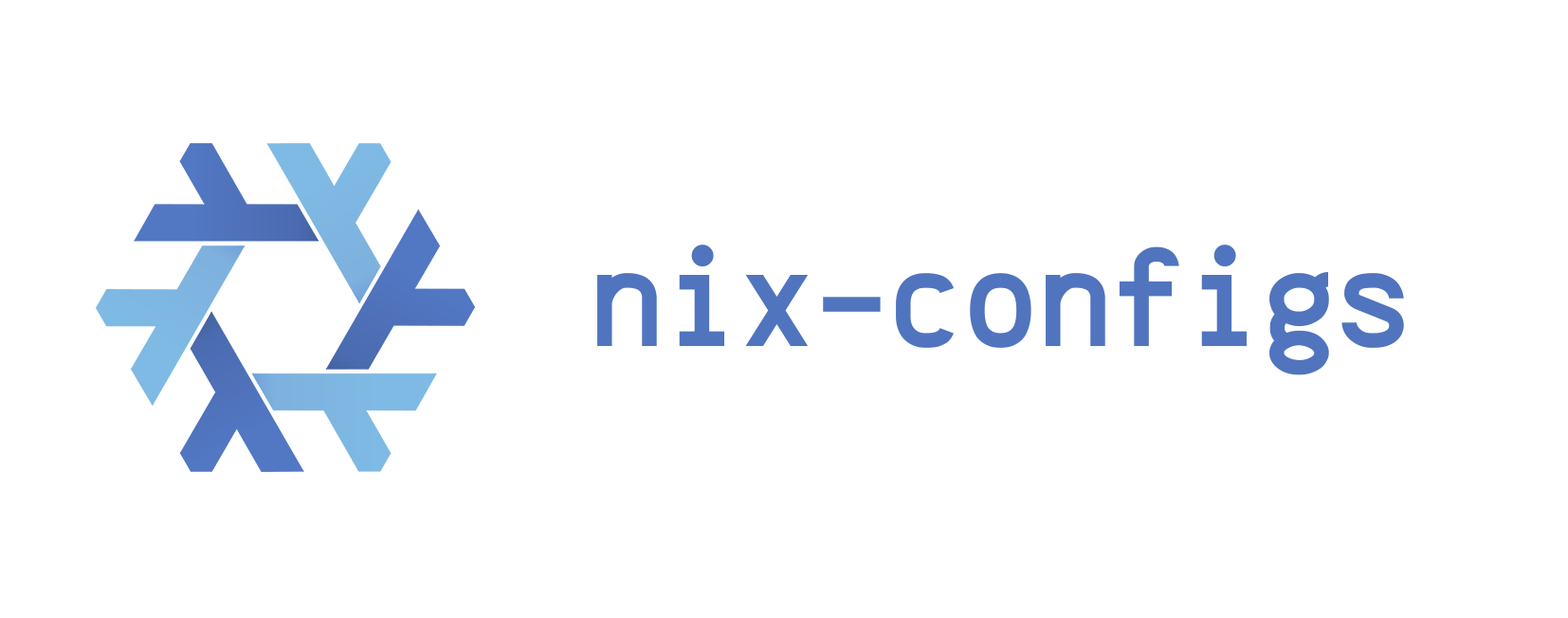
<style>
.page{position:relative;width:1568px;height:618px;background:#ffffff}
.page>*{position:absolute;margin:0}
.t1{font:142.2px "AnkaCoder-C87-b";color:#5074be}
</style>
<div class="page">
<p class="t1" style="left:597px;top:245px;width:807px;height:130px">nix-configs</p>
</div>
